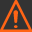
<style>
.page{position:relative;width:32px;height:32px;background:#333333}
.page>*{position:absolute;margin:0}
.t1{font:28px "CourierNewPS-BoldMT";color:#ff6415}
</style>
<div class="page">
<p class="t1" style="left:13px;top:10px;width:5px;height:18px">!</p>
</div>
